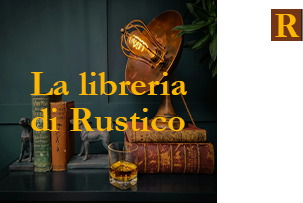
<style>
.page{position:relative;width:303px;height:203px;background:#ffffff}
.page>*{position:absolute;margin:0}
.t1{font:36px "Garamond-Bold";color:#fcb800}
.t2{font:36px/36px "Garamond-Bold";color:#fcb800}
</style>
<div class="page">
<p class="t1" style="left:275px;top:14px;width:25px;height:23px">R</p>
<p class="t2" style="left:30px;top:72px;width:157px;height:59px">La libreria <br>di Rustico</p>
</div>
